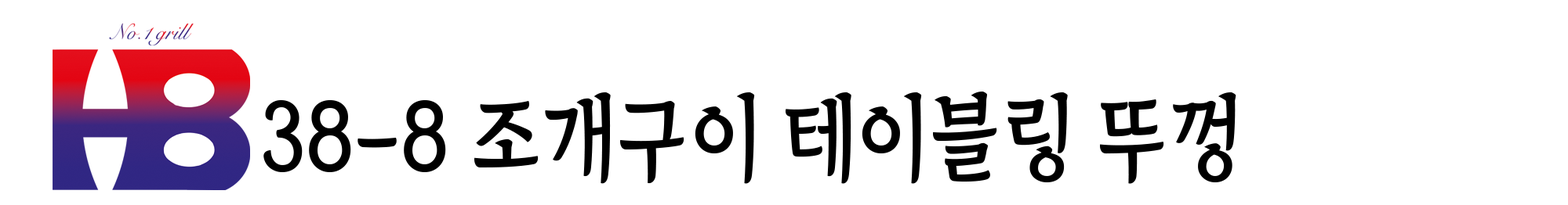
<style>
.page{position:relative;width:1568px;height:205px;background:#ffffff}
.page>*{position:absolute;margin:0}
.t1{font:93.7px "TheIndependenceHallofKorea-Regular";color:#000000;scale:0.89 1}
</style>
<div class="page">
<p class="t1" style="left:263px;top:92px;width:973px;height:92px">38-8 조개구이 테이블링 뚜껑</p>
</div>
